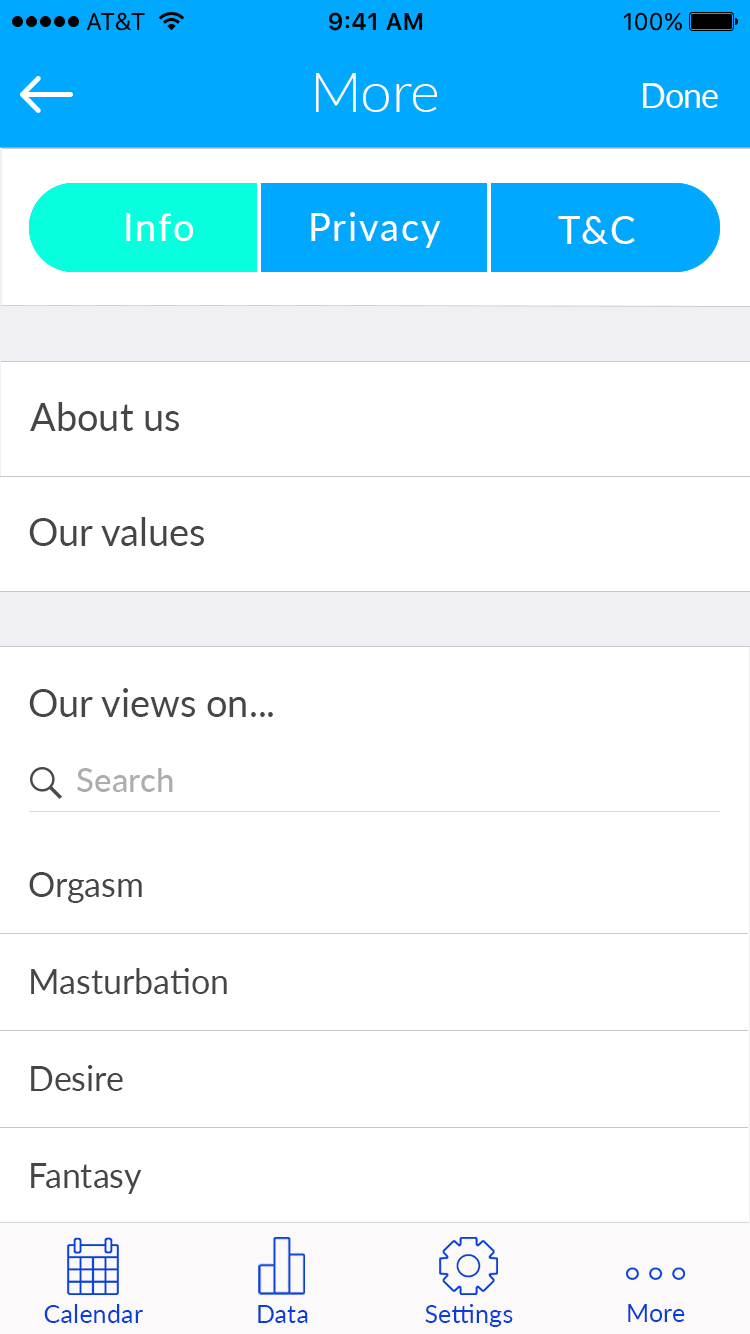
<style>
.page{position:relative;width:750px;height:1334px;background:#ffffff}
.page>*{position:absolute;margin:0}
.t1{font:56.4px "Lato-Light";color:#ffffff}
.t2{font:34px "Lato-Regular";letter-spacing:-0.025em;color:#ffffff}
.t3{font:38px "Lato-Regular";letter-spacing:0.05em;color:#ffffff}
.t4{font:38px "Lato-Regular";color:#464646}
.t5{font:33px "Lato-Medium";color:#adadad}
.t6{font:34px "Lato-Regular";color:#464646}
.t7{font:25px "Lato-Regular";letter-spacing:0.01em;color:#083ed9}
</style>
<div class="page">
<p class="t1" style="left:316px;top:73px;width:121px;height:39px">More</p>
<p class="t2" style="left:643px;top:83px;width:75px;height:25px">Done</p>
<p class="t3" style="left:126px;top:213px;width:67px;height:28px">Info</p>
<p class="t3" style="left:311px;top:212px;width:130px;height:36px">Privacy</p>
<p class="t3" style="left:558px;top:216px;width:77px;height:28px">T&amp;C</p>
<p class="t4" style="left:30px;top:402px;width:149px;height:29px">About us</p>
<p class="t4" style="left:29px;top:517px;width:175px;height:29px">Our values</p>
<p class="t4" style="left:29px;top:688px;width:244px;height:29px">Our views on...</p>
<p class="t5" style="left:77px;top:768px;width:96px;height:24px">Search</p>
<p class="t6" style="left:29px;top:872px;width:113px;height:31px">Orgasm</p>
<p class="t6" style="left:31px;top:968px;width:196px;height:26px">Masturbation</p>
<p class="t6" style="left:31px;top:1065px;width:92px;height:26px">Desire</p>
<p class="t6" style="left:31px;top:1163px;width:111px;height:31px">Fantasy</p>
<p class="t7" style="left:44px;top:1304px;width:99px;height:19px">Calendar</p>
<p class="t7" style="left:258px;top:1305px;width:50px;height:18px">Data</p>
<p class="t7" style="left:425px;top:1304px;width:88px;height:23px">Settings</p>
<p class="t7" style="left:628px;top:1304px;width:57px;height:18px">More</p>
</div>
